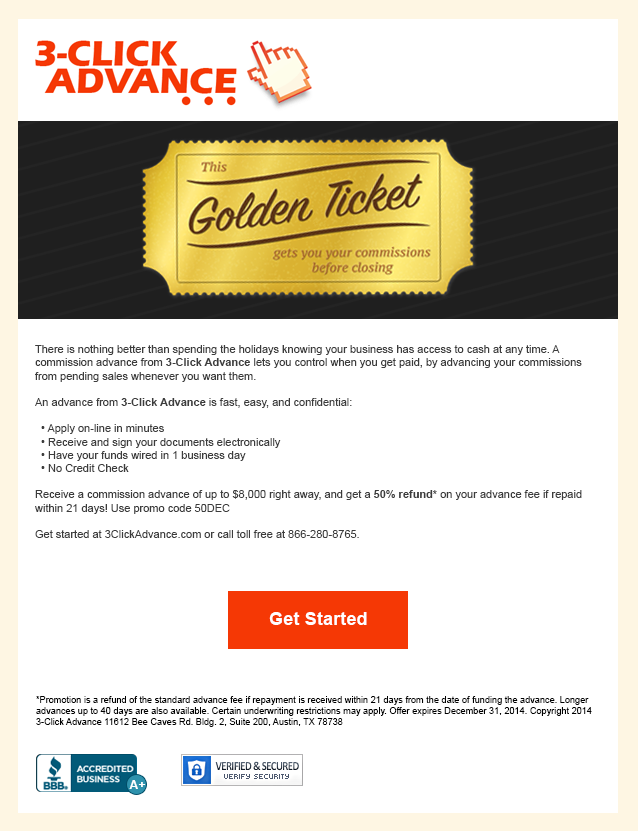
<style>
.page{position:relative;width:638px;height:831px;background:#ffffff}
.page>*{position:absolute;margin:0}
.t1{font:12px "ArialMT";color:#3c3c3c}
.t2{font:12px "Arial-BoldMT";color:#3c3c3c}
.t3{font:18.3px "Arial-BoldMT";color:#ffffff}
.t4{font:9.2px "ArialMT";color:#000000}
</style>
<div class="page">
<p class="t1" style="left:35px;top:345px;width:547px;height:193px">There is nothing better than spending the holidays knowing your business has access to cash at any time. A commission advance from <span class="t2">3-Click Advance</span> lets you control when you get paid, by advancing your commissions from pending sales whenever you want them.  <br><br>An advance from <span class="t2">3-Click Advance</span> is fast, easy, and confidential:<br><br>  • Apply on-line in minutes<br>  • Receive and sign your documents electronically<br>  • Have your funds wired in 1 business day<br>  • No Credit Check<br><br>Receive a commission advance of up to $8,000 right away, and get a <span class="t2">50% refund*</span> on your advance fee if repaid within 21 days! Use promo code 50DEC<br><br>Get started at 3ClickAdvance.com or call toll free at 866-280-8765.</p>
<p class="t3" style="left:269px;top:612px;width:98px;height:13px">Get Started</p>
<p class="t4" style="left:36px;top:696px;width:556px;height:31px">*Promotion is a refund of the standard advance fee if repayment is received within 21 days from the date of funding the advance. Longer advances up to 40 days are also available. Certain underwriting restrictions may apply. Offer expires December 31, 2014. Copyright 2014 3-Click Advance 11612 Bee Caves Rd. Bldg. 2, Suite 200, Austin, TX 78738</p>
</div>
